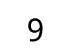
<style>
.page{position:relative;width:70px;height:55px;background:#ffffff}
.page>*{position:absolute;margin:0}
.t1{font:31.8px "DroidSans";color:#000000}
</style>
<div class="page">
<p class="t1" style="left:28px;top:18px;width:15px;height:24px">9</p>
</div>
